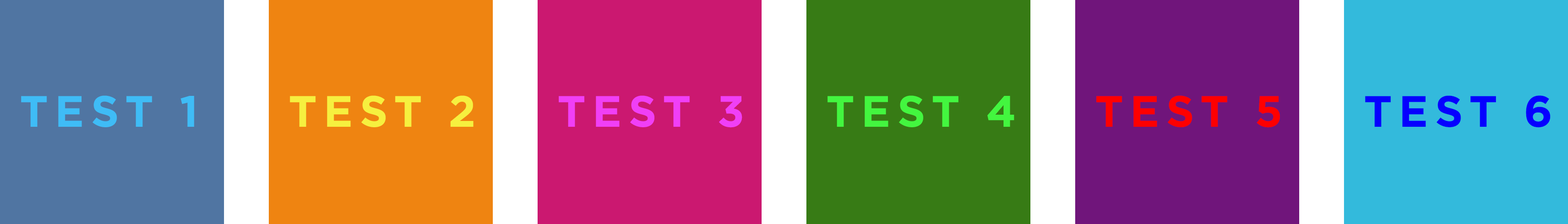
<style>
.page{position:relative;width:1568px;height:224px}
.page>*{position:absolute;margin:0}
.t1{font:43.9px "Gotham-Bold";letter-spacing:0.15em;color:#3fbcf6}
.t2{font:43.9px "Gotham-Bold";letter-spacing:0.15em;color:#f6f03f}
.t3{font:43.9px "Gotham-Bold";letter-spacing:0.15em;color:#f03ff6}
.t4{font:43.9px "Gotham-Bold";letter-spacing:0.15em;color:#43f63f}
.t5{font:43.9px "Gotham-Bold";letter-spacing:0.15em;color:#ff0000}
.t6{font:43.9px "Gotham-Bold";letter-spacing:0.15em;color:#0600ff}
</style>
<div class="page">
<p class="t1" style="left:21px;top:95px;width:173px;height:32px">TEST 1</p>
<p class="t2" style="left:290px;top:95px;width:184px;height:32px">TEST 2</p>
<p class="t3" style="left:559px;top:95px;width:183px;height:33px">TEST 3</p>
<p class="t4" style="left:827px;top:95px;width:187px;height:32px">TEST 4</p>
<p class="t5" style="left:1096px;top:95px;width:184px;height:33px">TEST 5</p>
<p class="t6" style="left:1365px;top:95px;width:186px;height:33px">TEST 6</p>
</div>
